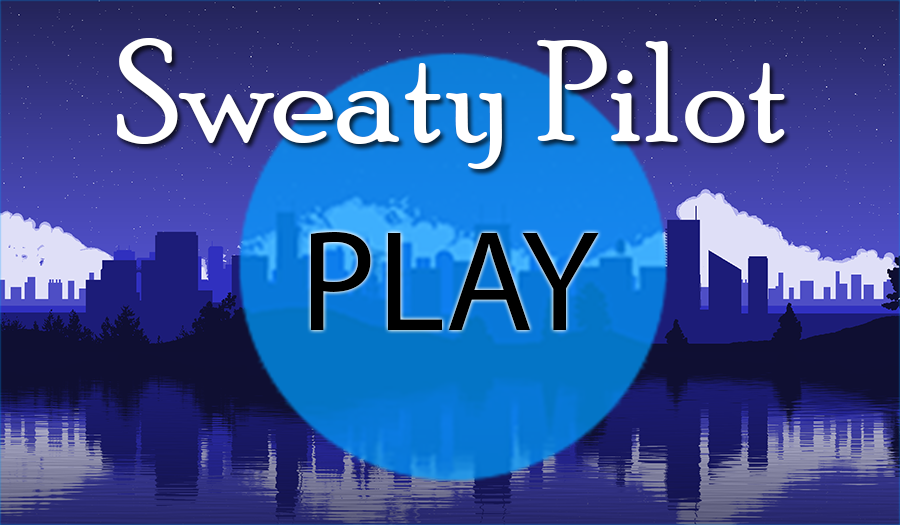
<style>
.page{position:relative;width:900px;height:525px}
.page>*{position:absolute;margin:0}
.t1{font:144px "PoorRichard-Regular";color:#ffffff}
.t2{font:144px "MyriadPro-Regular";color:#000000}
</style>
<div class="page">
<p class="t1" style="left:116px;top:38px;width:669px;height:131px">Sweaty Pilot</p>
<p class="t2" style="left:311px;top:231px;width:288px;height:99px">PLAY</p>
</div>
